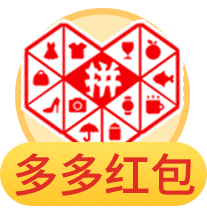
<style>
.page{position:relative;width:207px;height:218px;background:#ffffff}
.page>*{position:absolute;margin:0}
.t1{font:46px "SourceHanSansCN-Medium";color:#e02e24}
</style>
<div class="page">
<p class="t1" style="left:15px;top:153px;width:180px;height:43px">多多红包</p>
</div>
